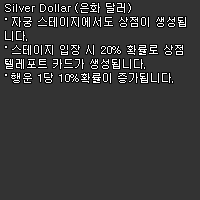
<style>
.page{position:relative;width:200px;height:200px;background:#333333}
.page>*{position:absolute;margin:0}
.t1{font:11px/14px "Dotum";color:#ffffff}
</style>
<div class="page">
<p class="t1" style="left:5px;top:3px;width:181px;height:80px">Silver Dollar (은화 달러)<br>˚ 자궁 스테이지에서도 상점이 생성됩<br>니다.<br>˚ 스테이지 입장 시 20% 확률로 상점<br>텔레포트 카드가 생성됩니다.<br>˚ 행운 1당 10%확률이 증가됩니다.</p>
</div>
